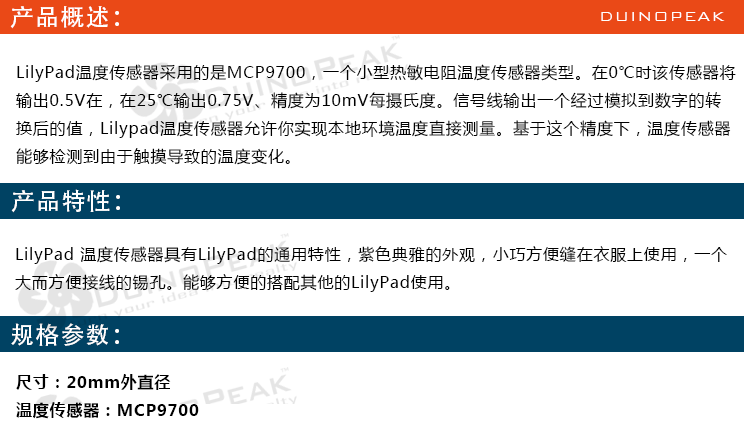
<style>
.page{position:relative;width:744px;height:438px;background:#ffffff}
.page>*{position:absolute;margin:0}
.t1{font:24px "AdobeHeitiStd-Regular";letter-spacing:0.05em;color:#ffffff}
.t2{font:18px "BankGothicBT-Light";letter-spacing:0.05em;color:#ffffff}
.t3{font:16px "MicrosoftYaHei";letter-spacing:0.05em;color:#000000}
.t4{font:16px "MicrosoftYaHei-Bold";letter-spacing:0.05em;color:#000000}
</style>
<div class="page">
<p class="t1" style="left:10px;top:6px;width:109px;height:23px">产品概述：</p>
<p class="t2" style="left:601px;top:12px;width:124px;height:9px">DUINOPEAK</p>
<p class="t3" style="left:16px;top:64px;width:720px;height:101px">LilyPad温度传感器采用的是MCP9700，一个小型热敏电阻温度传感器类型。在0℃时该传感器将<br>输出0.5V在，在25℃输出0.75V、精度为10mV每摄氏度。信号线输出一个经过模拟到数字的转<br>换后的值，Lilypad温度传感器允许你实现本地环境温度直接测量。基于这个精度下，温度传感器<br>能够检测到由于触摸导致的温度变化。</p>
<p class="t1" style="left:11px;top:189px;width:109px;height:24px">产品特性：</p>
<p class="t3" style="left:15px;top:246px;width:712px;height:46px">LilyPad 温度传感器具有LilyPad的通用特性，紫色典雅的外观，小巧方便缝在衣服上使用，一个<br>大而方便接线的锡孔。能够方便的搭配其他的LilyPad使用。</p>
<p class="t1" style="left:11px;top:323px;width:108px;height:23px">规格参数：</p>
<p class="t4" style="left:16px;top:374px;width:183px;height:45px">尺寸：20mm外直径<br>温度传感器：MCP9700</p>
</div>
